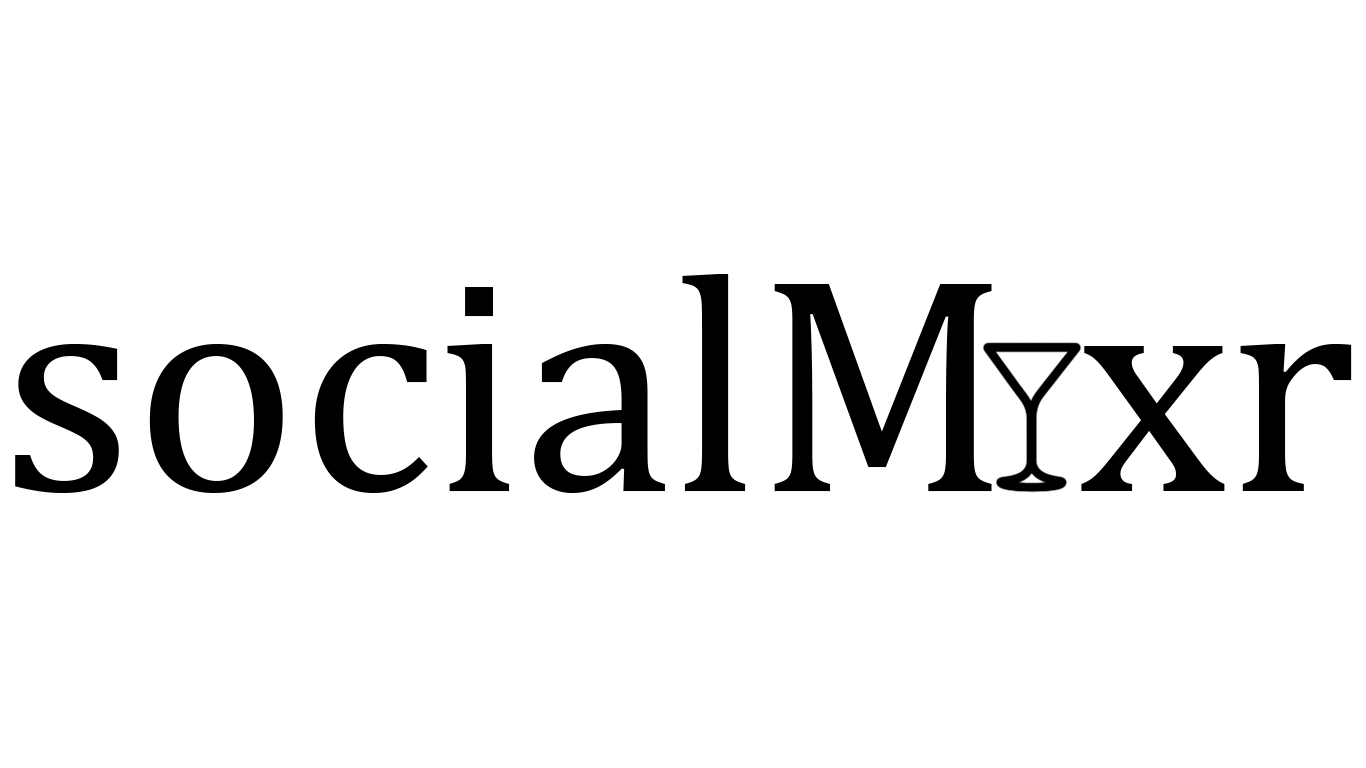
<style>
.page{position:relative;width:1366px;height:768px;background:#ffffff}
.page>*{position:absolute;margin:0}
.t1{font:310px "CambriaMath";color:#000000}
</style>
<div class="page">
<p class="t1" style="left:15px;top:274px;width:1337px;height:219px">socialM xr</p>
</div>
